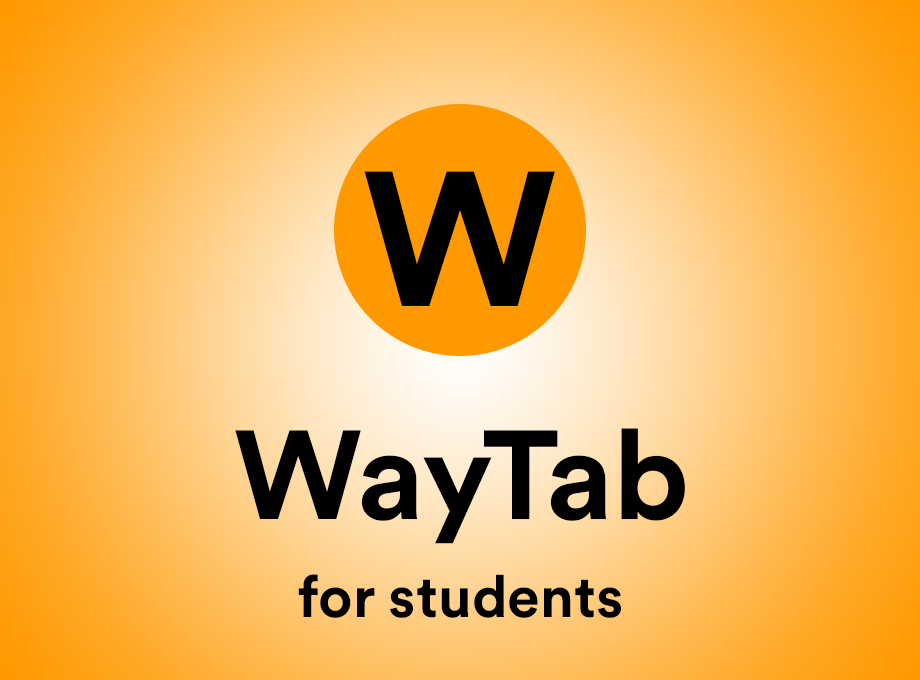
<style>
.page{position:relative;width:920px;height:680px}
.page>*{position:absolute;margin:0}
.t1{font:189.6px "CircularBold";color:#000000}
.t2{font:125px "CircularBold";color:#000000}
.t3{font:58.3px "CircularBold";color:#000000}
</style>
<div class="page">
<p class="t1" style="left:364px;top:171px;width:191px;height:135px">W</p>
<p class="t2" style="left:235px;top:428px;width:450px;height:116px">WayTab</p>
<p class="t3" style="left:298px;top:574px;width:324px;height:44px">for students</p>
</div>
